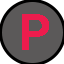
<style>
.page{position:relative;width:64px;height:64px;background:#5b5959}
.page>*{position:absolute;margin:0}
.t1{font:50px "Roboto-Bold";color:#ed1c4d}
</style>
<div class="page">
<p class="t1" style="left:22px;top:14px;width:27px;height:36px">P</p>
</div>
